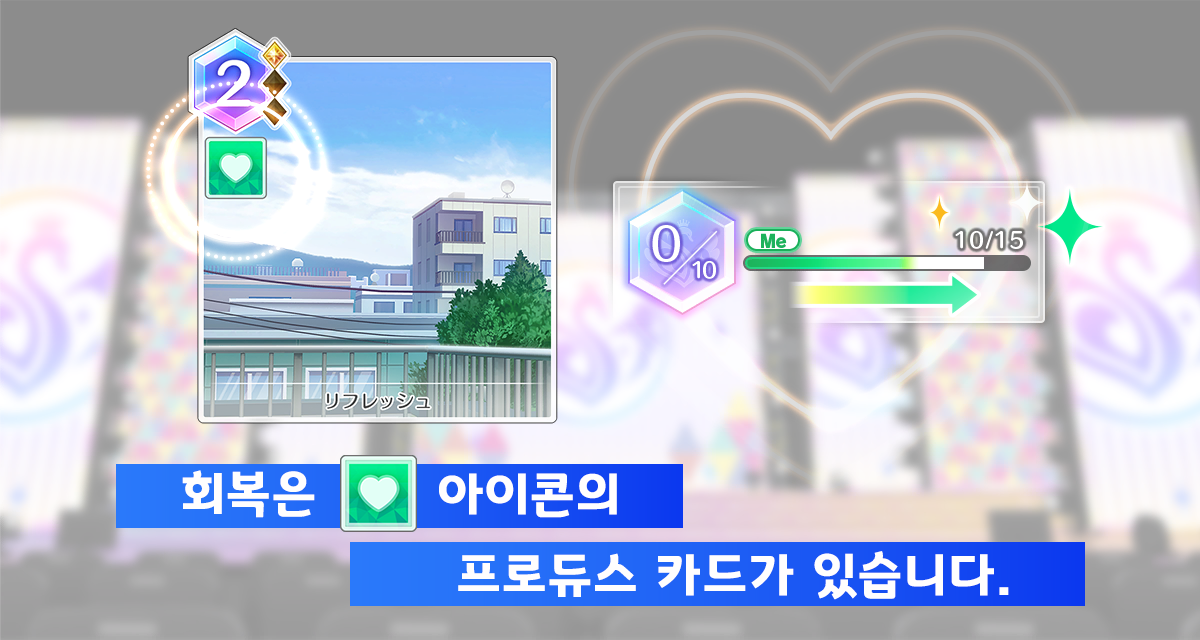
<style>
.page{position:relative;width:1200px;height:640px}
.page>*{position:absolute;margin:0}
.t1{font:50.7px "GyeonggiTitleB";letter-spacing:0.05em;color:#fffefe}
</style>
<div class="page">
<p class="t1" style="left:182px;top:470px;width:133px;height:48px">회복은</p>
<p class="t1" style="left:439px;top:473px;width:178px;height:45px">아이콘의</p>
<p class="t1" style="left:458px;top:551px;width:551px;height:49px">프로듀스 카드가 있습니다.</p>
</div>
